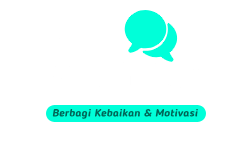
<style>
.page{position:relative;width:250px;height:150px;background:#ffffff}
.page>*{position:absolute;margin:0}
.t1{font:10.4px "BloggerSans-BoldItalic";color:#006657;scale:1.11 1}
</style>
<div class="page">
<p class="t1" style="left:52px;top:108px;width:146px;height:11px">Berbagi Kebaikan &amp; Motivasi</p>
</div>
